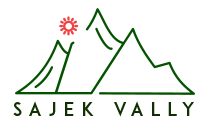
<style>
.page{position:relative;width:208px;height:125px;background:#ffffff}
.page>*{position:absolute;margin:0}
.t1{font:18.7px "ADAM.CGPRO";letter-spacing:0.38em;color:#103001}
</style>
<div class="page">
<p class="t1" style="left:13px;top:101px;width:181px;height:16px">SAJEK VALLY</p>
</div>
